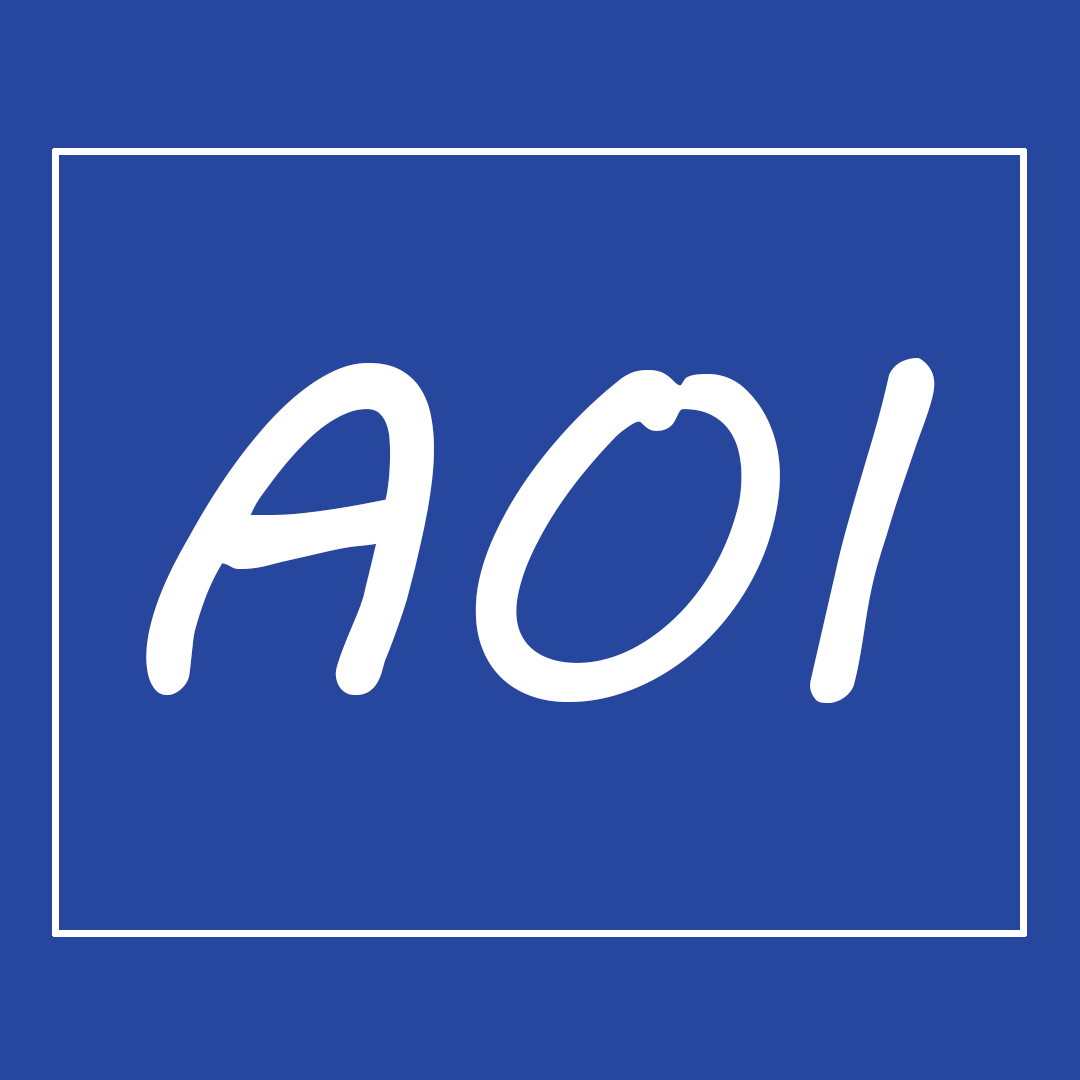
<style>
.page{position:relative;width:1080px;height:1080px;background:#27479f}
.page>*{position:absolute;margin:0}
.t1{font:466.7px "MVBoli";color:#ffffff}
</style>
<div class="page">
<p class="t1" style="left:146px;top:358px;width:789px;height:345px">AOI</p>
</div>
